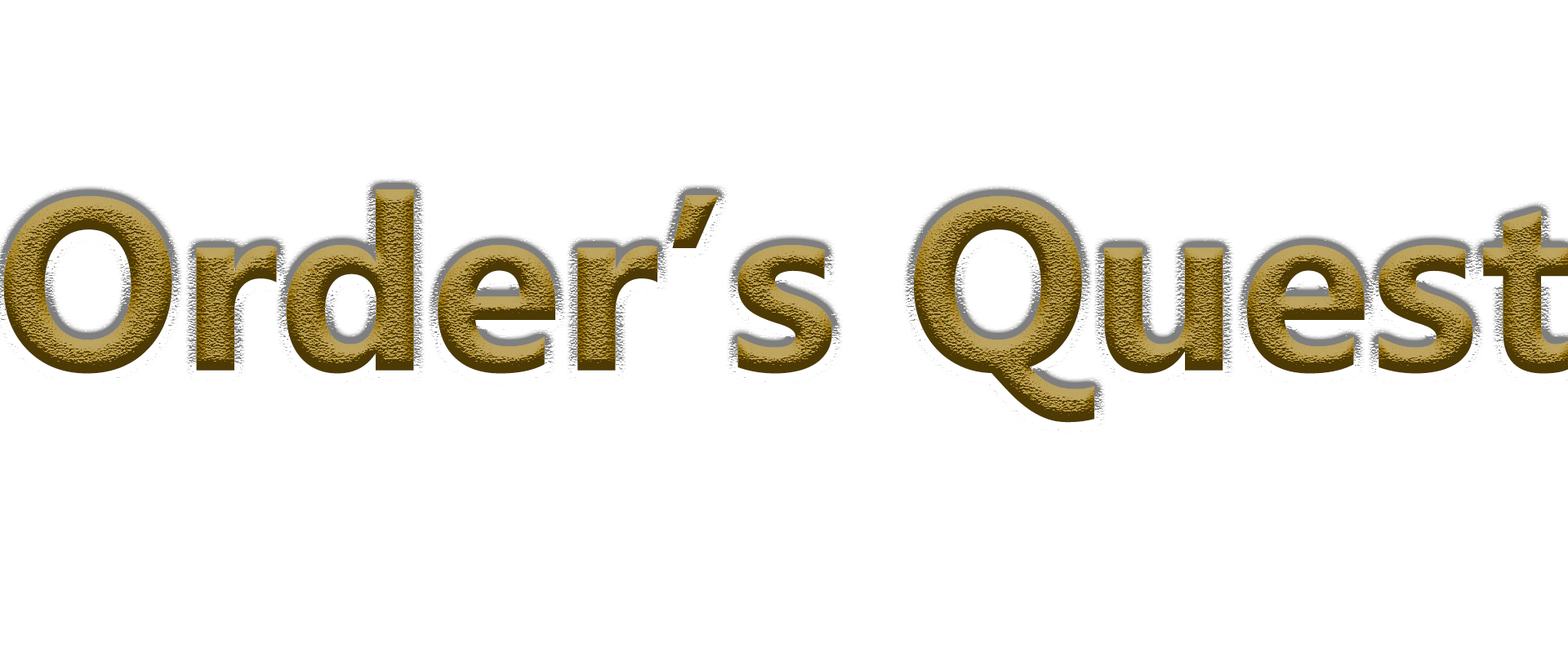
<style>
.page{position:relative;width:1568px;height:653px;background:#ffffff}
.page>*{position:absolute;margin:0}
.t1{font:244.6px "MicrosoftPhagsPa-Bold"}
</style>
<div class="page">
<p class="t1" style="left:3px;top:189px;width:1566px;height:234px">Order’s Quest</p>
</div>
